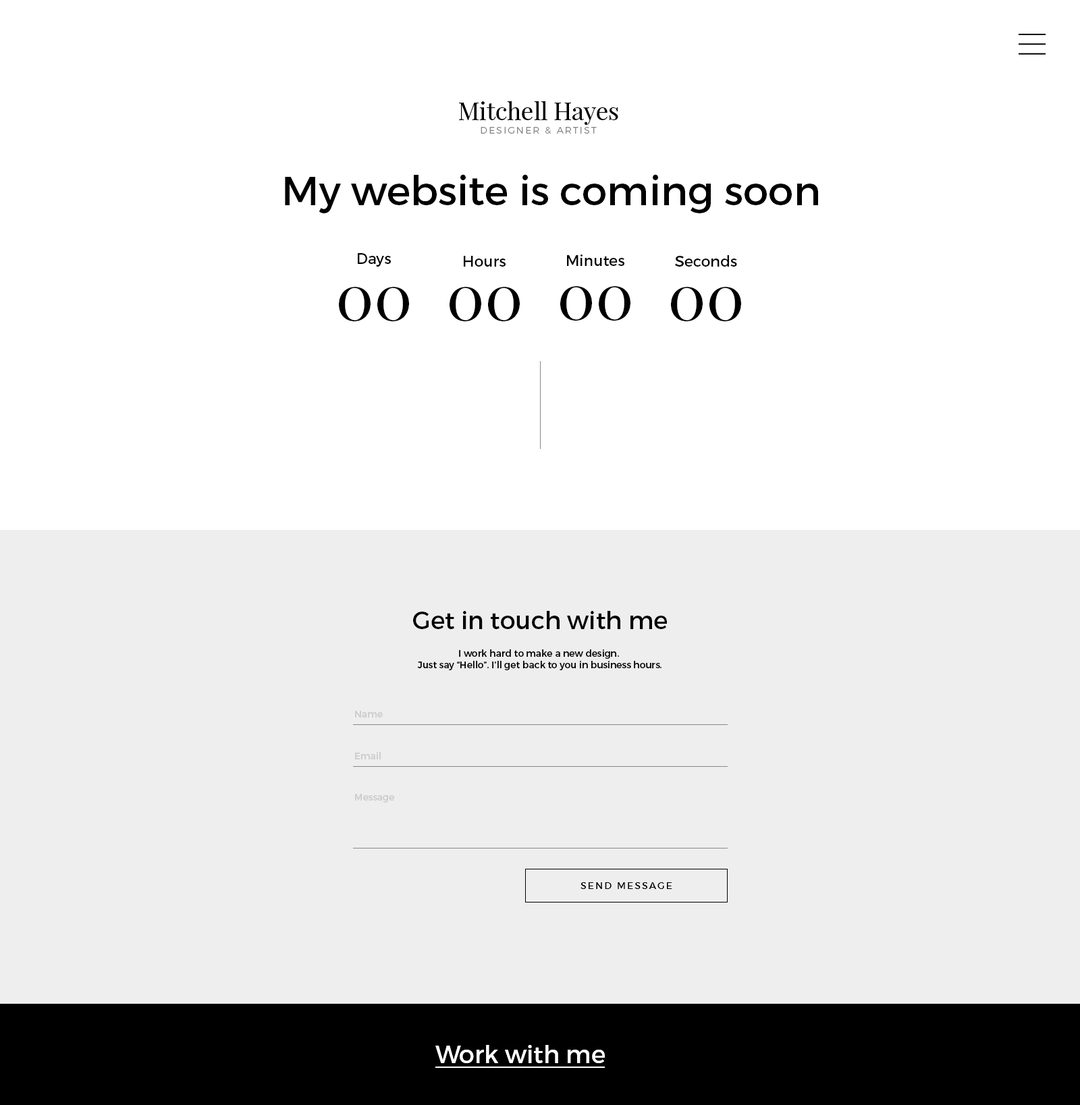
<style>
.page{position:relative;width:1080px;height:1105px;background:#ffffff}
.page>*{position:absolute;margin:0}
.t1{font:24.3px "PlayfairDisplay-Regular";color:#000000}
.t2{font:9.4px "Montserrat-Light";letter-spacing:0.15em;color:#888888}
.t3{font:40.5px "Montserrat-Regular";color:#000000}
.t4{font:14.8px "Montserrat-Regular";color:#000000}
.t5{font:64.1px "PlayfairDisplay-Regular";color:#000000}
.t6{font:24.3px "Montserrat-Regular";color:#010101}
.t7{font:9.4px "Montserrat-Regular";color:#000000}
.t8{font:9.4px "Montserrat-Regular";color:#cccccc}
.t9{font:9.4px "Montserrat-Regular";letter-spacing:0.15em;color:#000000}
.t10{font:24.3px "Montserrat-Regular";color:#ffffff}
</style>
<div class="page">
<p class="t1" style="left:459px;top:101px;width:159px;height:24px">Mitchell Hayes</p>
<p class="t2" style="left:480px;top:127px;width:116px;height:7px">DESIGNER &amp; ARTIST</p>
<p class="t3" style="left:285px;top:174px;width:533px;height:39px">My website is coming soon</p>
<p class="t4" style="left:358px;top:253px;width:33px;height:14px">Days</p>
<p class="t4" style="left:464px;top:256px;width:41px;height:11px">Hours</p>
<p class="t4" style="left:567px;top:254px;width:57px;height:12px">Minutes</p>
<p class="t4" style="left:675px;top:255px;width:62px;height:12px">Seconds</p>
<p class="t5" style="left:339px;top:287px;width:70px;height:34px">00</p>
<p class="t5" style="left:449px;top:287px;width:71px;height:34px">00</p>
<p class="t5" style="left:560px;top:286px;width:70px;height:34px">00</p>
<p class="t5" style="left:671px;top:287px;width:70px;height:34px">00</p>
<p class="t6" style="left:413px;top:611px;width:254px;height:18px">Get in touch with me</p>
<p class="t7" style="left:417px;top:649px;width:244px;height:21px;text-align:center">I work hard to make a new design. <br>Just say “Hello”. I’ll get back to you in business hours.</p>
<p class="t8" style="left:355px;top:710px;width:28px;height:7px">Name</p>
<p class="t8" style="left:355px;top:752px;width:26px;height:7px">Email</p>
<p class="t8" style="left:355px;top:793px;width:39px;height:9px">Message</p>
<p class="t9" style="left:580px;top:882px;width:92px;height:7px">SEND MESSAGE</p>
<p class="t10" style="left:435px;top:1044px;width:170px;height:19px">Work with me</p>
</div>
